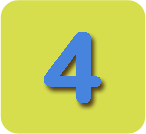
<style>
.page{position:relative;width:146px;height:134px;background:#d6de4d}
.page>*{position:absolute;margin:0}
.t1{font:94.7px "ArialRoundedMTBold";letter-spacing:-0.01em;color:#4784de;font-weight:bold}
</style>
<div class="page">
<p class="t1" style="left:44px;top:32px;width:57px;height:71px">4</p>
</div>
